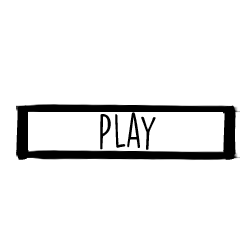
<style>
.page{position:relative;width:250px;height:250px;background:#ffffff}
.page>*{position:absolute;margin:0}
.t1{font:43.1px "DKLemonYellowSun";color:#000000}
</style>
<div class="page">
<p class="t1" style="left:100px;top:112px;width:56px;height:38px">PLay</p>
</div>
